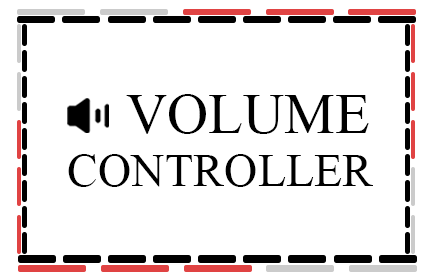
<style>
.page{position:relative;width:440px;height:280px;background:#ffffff}
.page>*{position:absolute;margin:0}
.t1{font:57.2px "TimesNewRomanPSMT";color:#000000;text-transform:uppercase}
.t2{font:46.4px "TimesNewRomanPSMT";color:#000000;text-transform:uppercase}
</style>
<div class="page">
<p class="t1" style="left:126px;top:94px;width:243px;height:40px">Volume</p>
<p class="t2" style="left:68px;top:154px;width:305px;height:33px">Controller</p>
</div>
